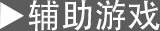
<style>
.page{position:relative;width:160px;height:31px;background:#5c5c5c}
.page>*{position:absolute;margin:0}
.t1{font:33.4px "AdobeHeitiStd-Regular";color:#ffffff}
</style>
<div class="page">
<p class="t1" style="left:28px;top:0px;width:132px;height:31px">辅助游戏</p>
</div>
